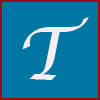
<style>
.page{position:relative;width:100px;height:100px;background:#0076a3}
.page>*{position:absolute;margin:0}
.t1{font:72px "LucidaCalligraphy-Italic";color:#f2eef5}
</style>
<div class="page">
<p class="t1" style="left:22px;top:17px;width:67px;height:63px">T</p>
</div>
